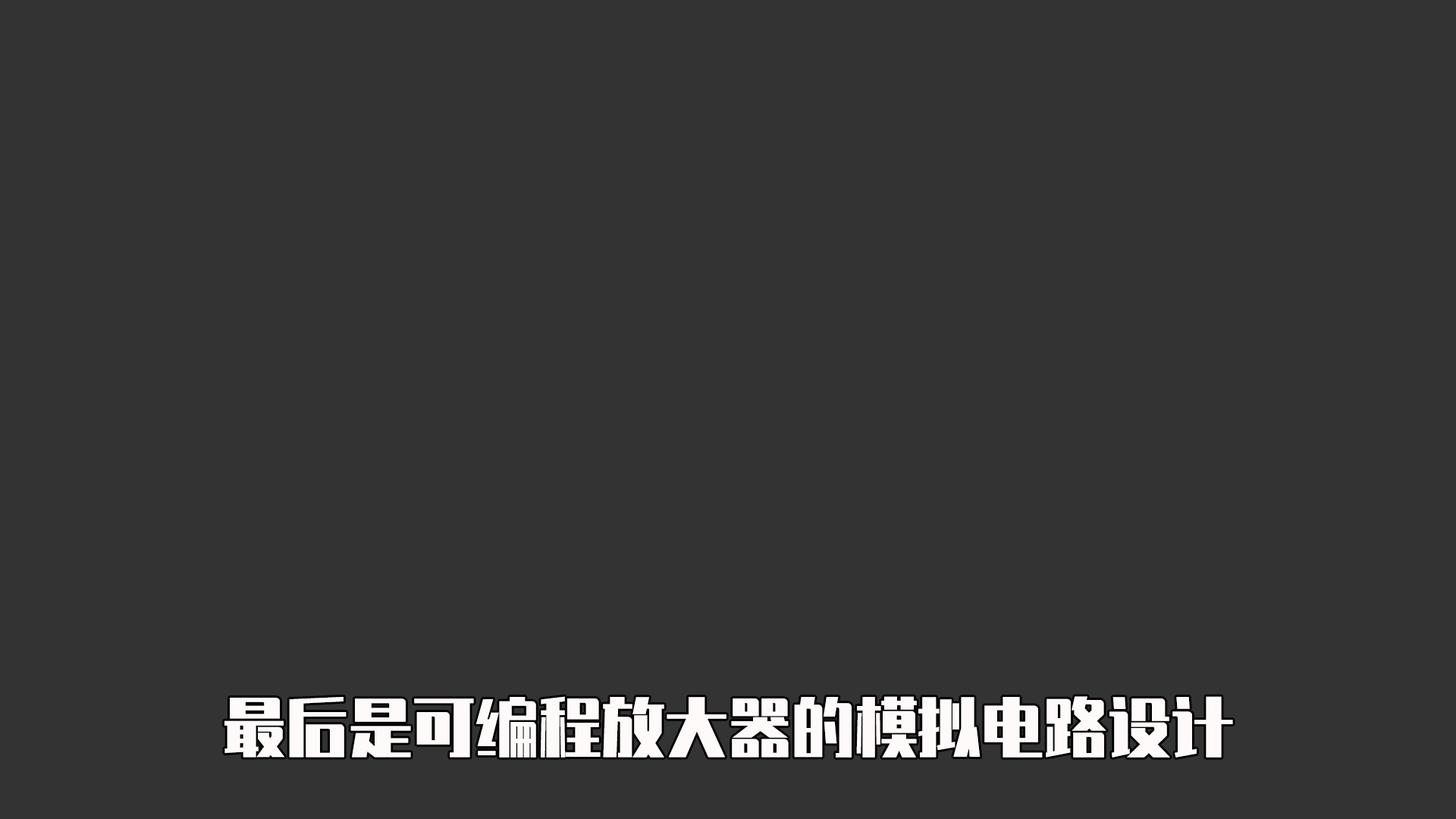
<style>
.page{position:relative;width:1456px;height:819px;background:#333333}
.page>*{position:absolute;margin:0}
.t1{font:63.2px "ZhenyanGB-Regular";color:#fefafa}
</style>
<div class="page">
<p class="t1" style="left:224px;top:696px;width:1009px;height:62px">最后是可编程放大器的模拟电路设计</p>
</div>
